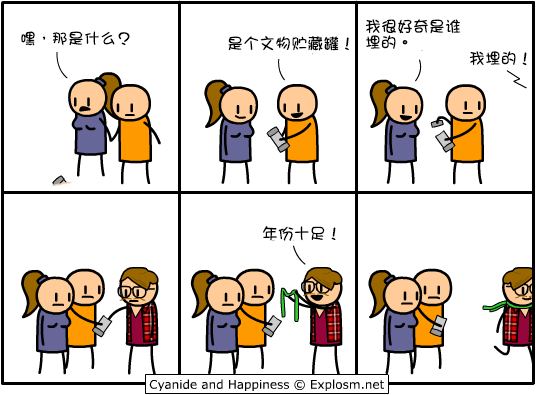
<style>
.page{position:relative;width:536px;height:395px;background:#ffffff}
.page>*{position:absolute;margin:0}
.t1{font:16px/16px "DFGirl";color:#000000}
.t2{font:16px "DFGirl";color:#000000}
</style>
<div class="page">
<p class="t1" style="left:365px;top:19px;width:96px;height:30px">我很好奇是谁<br>埋的。</p>
<p class="t2" style="left:21px;top:31px;width:109px;height:15px">嘿，那是什么？</p>
<p class="t2" style="left:228px;top:36px;width:121px;height:15px">是个文物贮藏罐！</p>
<p class="t2" style="left:469px;top:51px;width:58px;height:15px">我埋的！</p>
<p class="t2" style="left:263px;top:226px;width:73px;height:15px">年份十足！</p>
</div>
